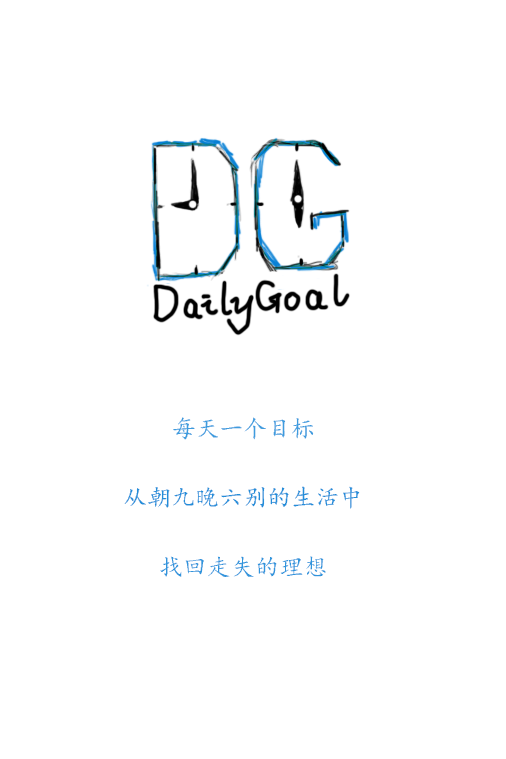
<style>
.page{position:relative;width:506px;height:759px;background:#ffffff}
.page>*{position:absolute;margin:0}
.t1{font:24px "¿¬Ìå";color:#3e9cde}
.t2{font:24px "¿¬Ìå";color:#238ed9}
.t3{font:24px "¿¬Ìå";color:#3095dc}
</style>
<div class="page">
<p class="t1" style="left:173px;top:417px;width:141px;height:23px">每天一个目标</p>
<p class="t2" style="left:124px;top:486px;width:236px;height:23px">从朝九晚六别的生活中</p>
<p class="t3" style="left:160px;top:556px;width:166px;height:21px">找回走失的理想</p>
</div>
